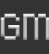
<style>
.page{position:relative;width:49px;height:54px;background:#333333}
.page>*{position:absolute;margin:0}
.t1{font:60px "Kenney-Pixel"}
</style>
<div class="page">
<p class="t1" style="left:0px;top:13px;width:50px;height:27px">GM</p>
</div>
